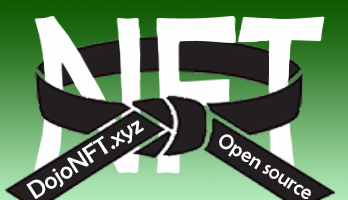
<style>
.page{position:relative;width:348px;height:200px}
.page>*{position:absolute;margin:0}
.t1{font:25px "BerlinSansFB-Reg";color:#fefefe}
.t2{font:21px "BerlinSansFB-Reg";color:#fefefe}
</style>
<div class="page">
<p class="t1" style="left:26px;top:120px;width:118px;height:79px;rotate:-33deg">DojoNFT.xyz</p>
<p class="t2" style="left:219px;top:134px;width:92px;height:65px;rotate:32deg">Open source</p>
</div>
